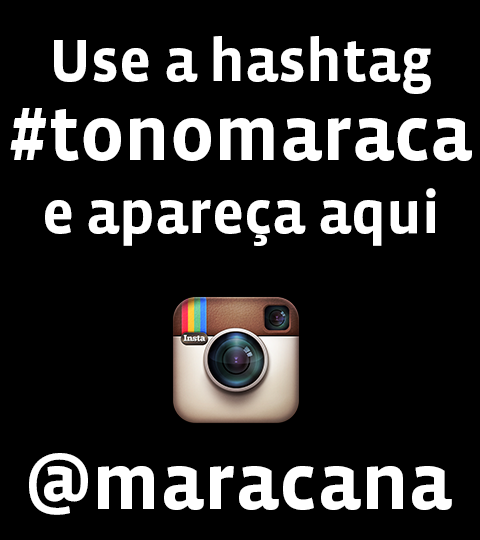
<style>
.page{position:relative;width:480px;height:540px;background:#000000}
.page>*{position:absolute;margin:0}
.t1{font:60.8px "VistaSansOT-Bold";color:#ffffff}
.t2{font:77.6px/79.3px "VistaSansOT-Bold";color:#ffffff}
.t3{font:81px "VistaSansOT-Bold";color:#ffffff}
</style>
<div class="page">
<p class="t1" style="left:10px;top:36px;width:462px;height:210px;text-align:center">Use a hashtag<br><span class="t2">#tonomaraca<br></span>e apareça aqui</p>
<p class="t3" style="left:29px;top:453px;width:423px;height:62px">@maracana</p>
</div>
